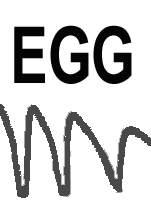
<style>
.page{position:relative;width:151px;height:200px;background:#ffffff}
.page>*{position:absolute;margin:0}
.t1{font:78.5px "Arial-BoldMT";letter-spacing:-0.01em;color:#040404;scale:0.72 1}
</style>
<div class="page">
<p class="t1" style="left:14px;top:25px;width:118px;height:59px">EGG</p>
</div>
